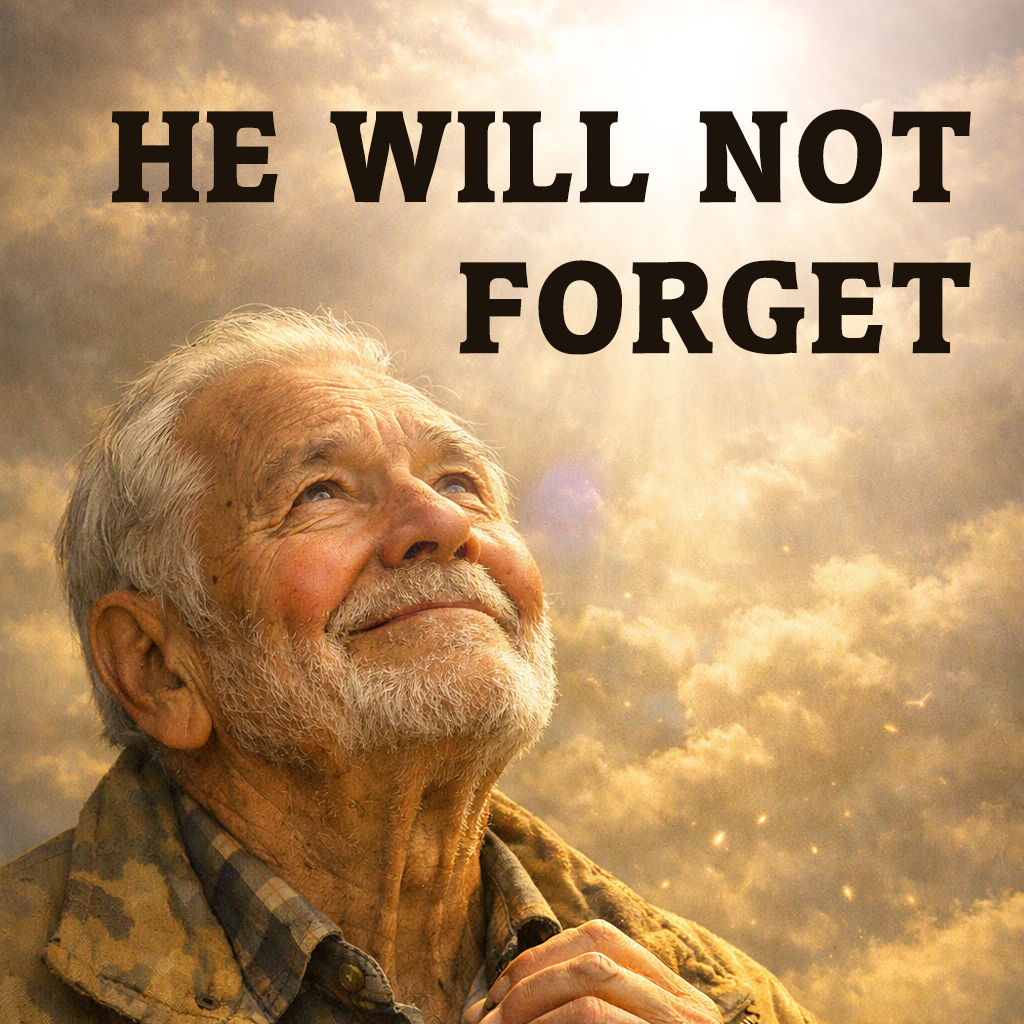
<style>
.page{position:relative;width:1024px;height:1024px}
.page>*{position:absolute;margin:0}
.t1{font:125.9px "Commons";letter-spacing:0.025em;color:#1c130b;font-weight:bold}
</style>
<div class="page">
<p class="t1" style="left:111px;top:109px;width:860px;height:246px;text-align:right">HE WILL NOT<br>FORGET</p>
</div>
